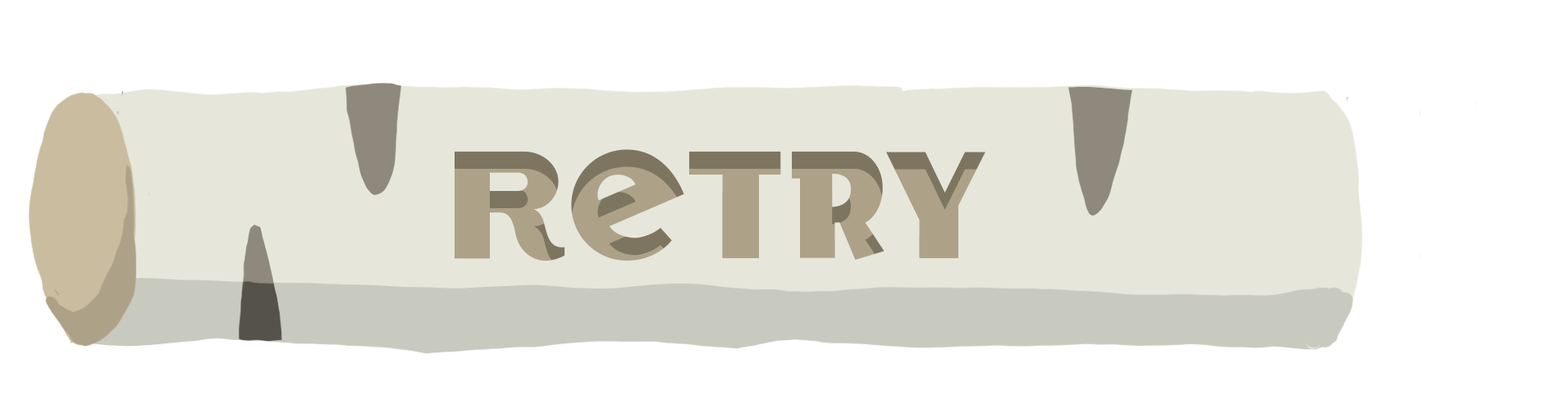
<style>
.page{position:relative;width:1568px;height:409px;background:#ffffff}
.page>*{position:absolute;margin:0}
.t1{font:148px "BadTyp-Regular";color:#ada288}
</style>
<div class="page">
<p class="t1" style="left:455px;top:149px;width:530px;height:113px">Retry</p>
</div>
